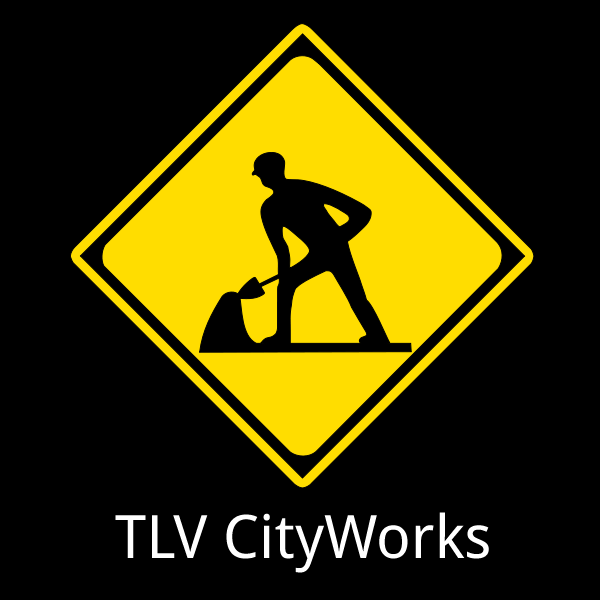
<style>
.page{position:relative;width:600px;height:600px;background:#000000}
.page>*{position:absolute;margin:0}
.t1{font:60px "DroidSans";color:#ffffff}
</style>
<div class="page">
<p class="t1" style="left:115px;top:512px;width:374px;height:61px">TLV CityWorks</p>
</div>
